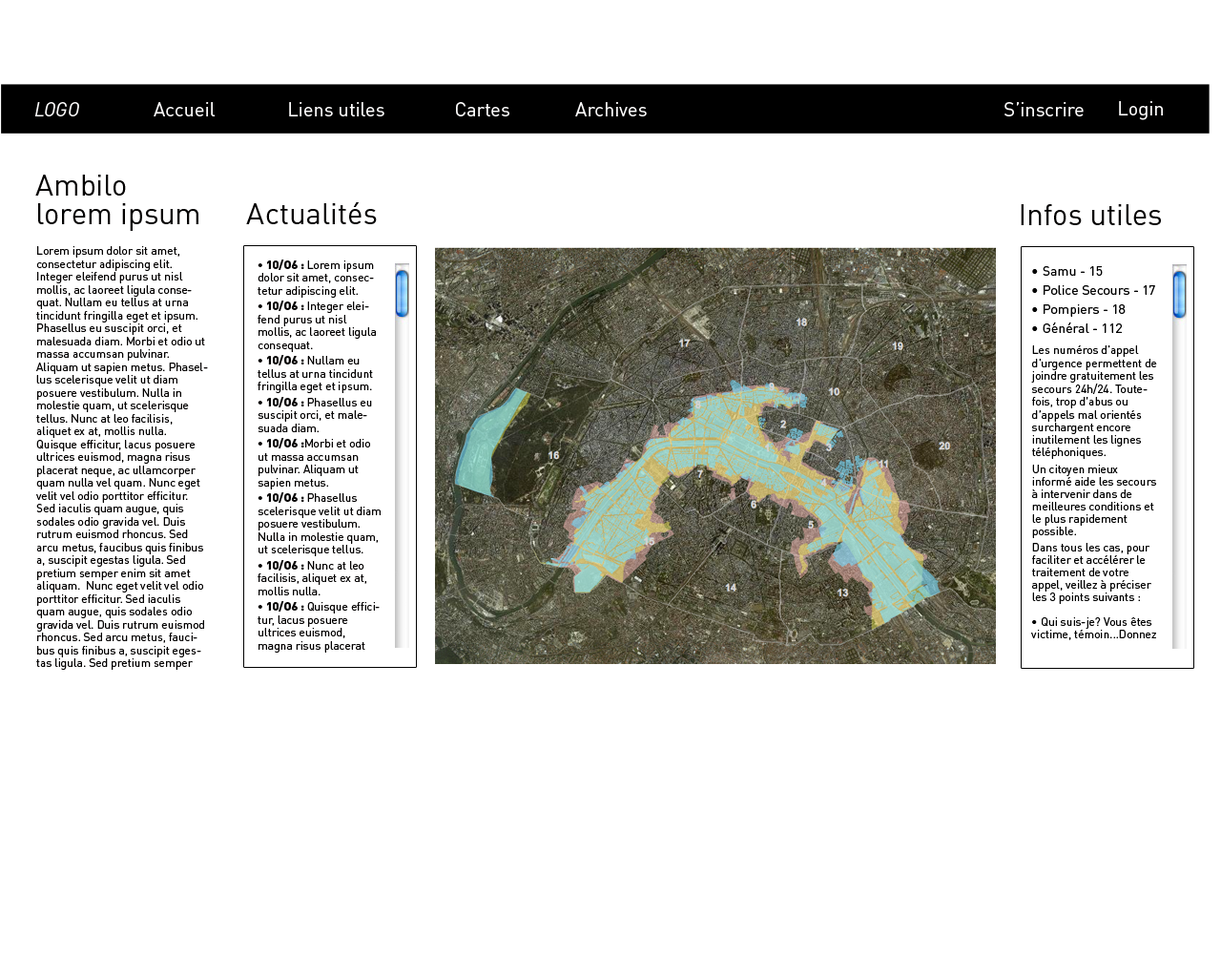
<style>
.page{position:relative;width:1221px;height:977px;background:#ffffff}
.page>*{position:absolute;margin:0}
.t1{font:19.1px "DINOT-Regular";color:#fdfcfc}
.t2{font:19.1px "DINOT-RegularItalic";color:#fdfcfc}
.t3{font:29.6px/28.6px "DINOT-Regular";color:#020000}
.t4{font:29.6px "DINOT-Regular";color:#020000}
.t5{font:11.4px/12.9px "DINOT-Regular";color:#020000}
.t6{font:11.4px/12.9px "DINOT-Black";letter-spacing:0.01em;color:#020000}
.t7{font:11.4px/12.4px "DINOT-Regular";color:#000000}
.t8{font:13.4px/19.1px "DINOT-Regular";color:#000000}
.t9{font:11.4px/12.9px "DINOT-Regular";color:#000000}
</style>
<div class="page">
<p class="t1" style="left:1119px;top:101px;width:44px;height:19px">Login</p>
<p class="t2" style="left:34px;top:102px;width:45px;height:14px">LOGO</p>
<p class="t1" style="left:154px;top:102px;width:62px;height:14px">Accueil</p>
<p class="t1" style="left:289px;top:102px;width:95px;height:14px">Liens utiles</p>
<p class="t1" style="left:456px;top:102px;width:53px;height:14px">Cartes</p>
<p class="t1" style="left:575px;top:102px;width:72px;height:14px">Archives</p>
<p class="t1" style="left:1004px;top:102px;width:80px;height:14px">S’inscrire</p>
<p class="t3" style="left:35px;top:175px;width:163px;height:56px">Ambilo <br>lorem ipsum</p>
<p class="t4" style="left:246px;top:202px;width:131px;height:22px">Actualités</p>
<p class="t4" style="left:1021px;top:204px;width:140px;height:21px">Infos utiles</p>
<p class="t5" style="left:36px;top:246px;width:172px;height:424px">Lorem ipsum dolor sit amet, consectetur adipiscing elit. Integer eleifend purus ut nisl mollis, ac laoreet ligula consequat. Nullam eu tellus at urna tincidunt fringilla eget et ipsum. Phasellus eu suscipit orci, et malesuada diam. Morbi et odio ut massa accumsan pulvinar. Aliquam ut sapien metus. Phasellus scelerisque velit ut diam posuere vestibulum. Nulla in molestie quam, ut scelerisque tellus. Nunc at leo facilisis, aliquet ex at, mollis nulla. Quisque efficitur, lacus posuere ultrices euismod, magna risus placerat neque, ac ullamcorper quam nulla vel quam. Nunc eget velit vel odio porttitor efficitur. Sed iaculis quam augue, quis sodales odio gravida vel. Duis rutrum euismod rhoncus. Sed arcu metus, faucibus quis finibus a, suscipit egestas ligula. Sed pretium semper enim sit amet aliquam.  Nunc eget velit vel odio porttitor efficitur. Sed iaculis quam augue, quis sodales odio gravida vel. Duis rutrum euismod rhoncus. Sed arcu metus, faucibus quis finibus a, suscipit egestas ligula. Sed pretium semper enim sit amet aliquam.</p>
<p class="t5" style="left:258px;top:259px;width:123px;height:393px"><span class="t6">• 10/O6 : </span>Lorem ipsum dolor sit amet, consectetur adipiscing elit. <br><span class="t6">• 10/O6 : </span>Integer eleifend purus ut nisl mollis, ac laoreet ligula consequat. <br><span class="t6">• 10/O6 : </span>Nullam eu tellus at urna tincidunt fringilla eget et ipsum. <br><span class="t6">• 10/O6 : </span>Phasellus eu suscipit orci, et malesuada diam. <br><span class="t6">• 10/O6 :</span>Morbi et odio ut massa accumsan pulvinar. Aliquam ut sapien metus. <br><span class="t6">• 10/O6 : </span>Phasellus scelerisque velit ut diam posuere vestibulum. Nulla in molestie quam, ut scelerisque tellus. <br><span class="t6">• 10/O6 : </span>Nunc at leo facilisis, aliquet ex at, mollis nulla. <br><span class="t6">• 10/O6 : </span>Quisque efficitur, lacus posuere ultrices euismod, magna risus placerat neque, ac ullamcorper quam nulla vel quam. Nunc eget velit vel odio porttitor ef</p>
<p class="t7" style="left:1031px;top:266px;width:126px;height:374px"><span class="t8">• Samu - 15<br>• Police Secours - 17<br>• Pompiers - 18<br>• Général - 112<br></span><span class="t9">Les numéros d'appel d'urgence permettent de joindre gratuitement les secours 24h/24. Toutefois, trop d’abus ou d’appels mal orientés surchar</span>gent encore inutilement les lignes téléphoniques.<br>Un citoyen mieux informé aide les secours à intervenir dans de meilleures conditions et le plus rapidement possible.<br>Dans tous les cas, pour faciliter et accélérer le traitement de votre appel, veillez à préciser les 3 points suivants :<br><br>• Qui suis-je? Vous êtes victime, témoin...Donnez</p>
</div>
